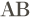
<style>
.page{position:relative;width:34px;height:18px;background:#ffffff}
.page>*{position:absolute;margin:0}
.t1{font:20px "RyuminPro-ExBold";letter-spacing:-0.08em;color:#4c4841}
</style>
<div class="page">
<p class="t1" style="left:0px;top:1px;width:30px;height:16px">AB</p>
</div>
